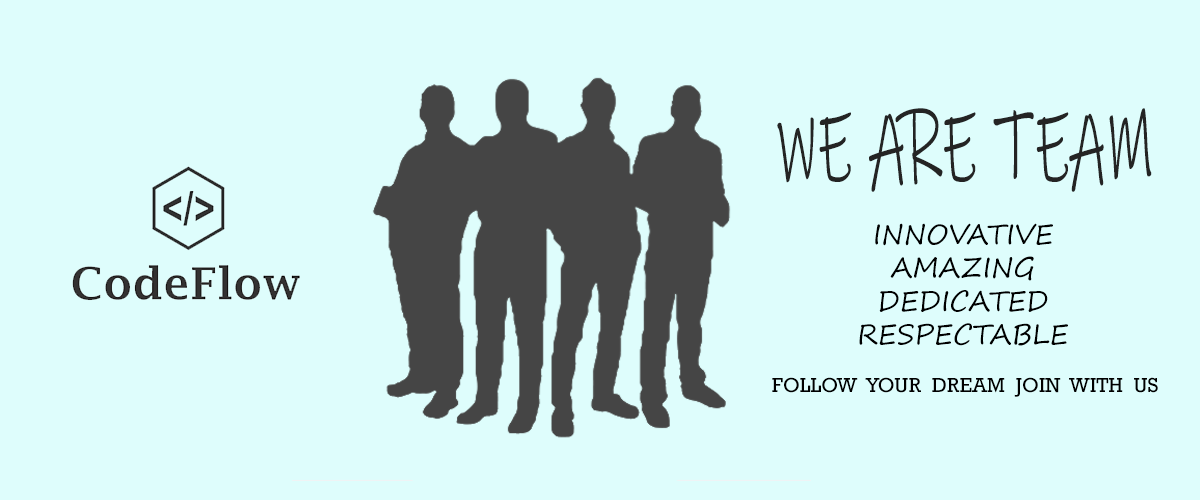
<style>
.page{position:relative;width:1200px;height:500px;background:#defdfc}
.page>*{position:absolute;margin:0}
.t1{font:102.7px "InkFree";color:#252525;scale:0.57 1}
.t2{font:27.8px "SegoePrint";color:#000000}
.t3{font:20.8px "Rockwell";color:#000000}
</style>
<div class="page">
<p class="t1" style="left:777px;top:108px;width:375px;height:84px">WE ARE TEAM</p>
<p class="t2" style="left:859px;top:223px;width:209px;height:123px;text-align:center">INNOVATIVE<br>AMAZING<br>DEDICATED<br>RESPECTABLE</p>
<p class="t3" style="left:772px;top:377px;width:386px;height:20px">FOLLOW  YOUR  DREAM  JOIN  WITH  US</p>
</div>
